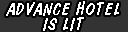
<style>
.page{position:relative;width:128px;height:32px;background:#333333}
.page>*{position:absolute;margin:0}
.t1{font:18px/15px "DomDiagonalBT-Regular";letter-spacing:0.05em;color:#ffffff}
</style>
<div class="page">
<p class="t1" style="left:6px;top:1px;width:113px;height:30px;text-align:center">ADVANCE HOTEL<br>IS LIT</p>
</div>
